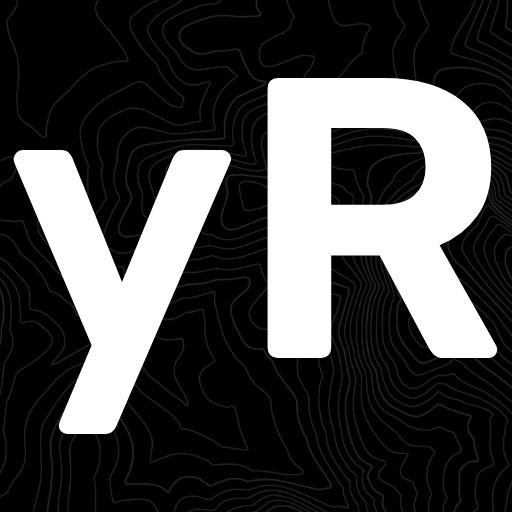
<style>
.page{position:relative;width:512px;height:512px;background:#000000}
.page>*{position:absolute;margin:0}
.t1{font:400px "Rubik-SemiBold";color:#ffffff}
</style>
<div class="page">
<p class="t1" style="left:13px;top:78px;width:485px;height:356px">yR</p>
</div>
